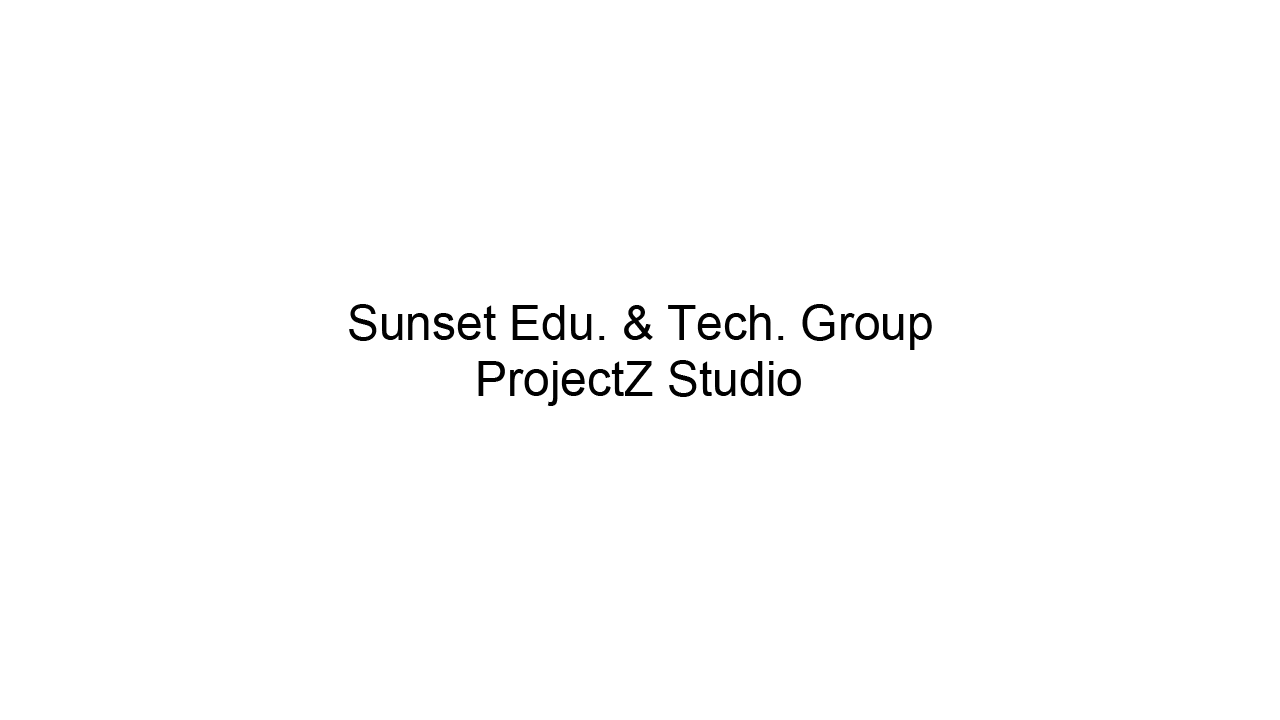
<style>
.page{position:relative;width:1280px;height:720px;background:#ffffff}
.page>*{position:absolute;margin:0}
.t1{font:48px "ArialMT";color:#010101}
.t2{font:48px "ArialMT";color:#000000}
</style>
<div class="page">
<p class="t1" style="left:349px;top:304px;width:583px;height:46px">Sunset Edu. &amp; Tech. Group</p>
<p class="t2" style="left:478px;top:360px;width:323px;height:46px">ProjectZ Studio</p>
</div>
